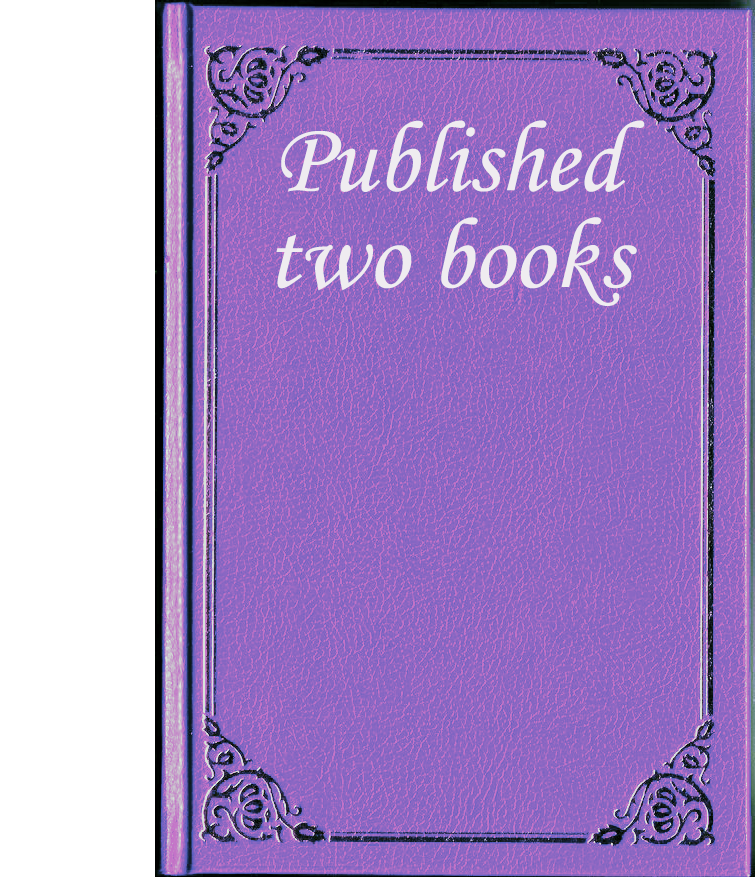
<style>
.page{position:relative;width:755px;height:877px;background:#ffffff}
.page>*{position:absolute;margin:0}
.t1{font:101.1px/96.6px "MonotypeCorsiva";color:#efecf0}
</style>
<div class="page">
<p class="t1" style="left:276px;top:120px;width:369px;height:186px;text-align:center">Published<br>two books</p>
</div>
